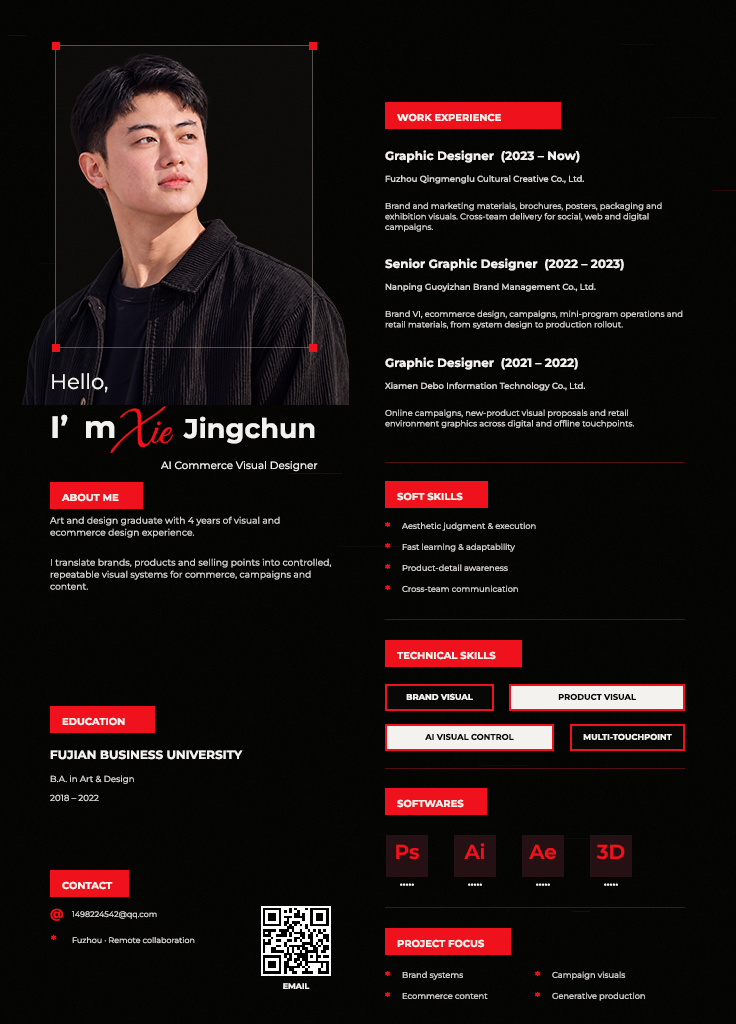
<style>
.page{position:relative;width:736px;height:1024px;background:#040403}
.page>*{position:absolute;margin:0}
.t1{font:10px "Montserrat-Bold";color:#f4f2ee}
.t2{font:12px "Montserrat-Bold";color:#f4f2ee}
.t3{font:8.5px "Montserrat-Medium";color:#d8d5d1}
.t4{font:8.3px/10.5px "Montserrat-Regular";color:#d8d5d1}
.t5{font:21px "Montserrat-Regular";color:#f4f2ee}
.t6{font:31px "Montserrat-Bold";color:#f4f2ee}
.t7{font:44px "GreatVibes-Regular";color:#ef111b}
.t8{font:27px "Montserrat-Bold";color:#f4f2ee}
.t9{font:10.5px "Montserrat-Regular";color:#f4f2ee}
.t10{font:9.2px/12px "Montserrat-Regular";color:#d8d5d1}
.t11{font:12px "Montserrat-Bold";color:#ef111b}
.t12{font:8.3px "Montserrat-Regular";color:#d8d5d1}
.t13{font:8.3px "Montserrat-Bold";color:#f4f2ee}
.t14{font:8.3px "Montserrat-Bold";color:#080807}
.t15{font:8.7px "Montserrat-Regular";color:#d8d5d1}
.t16{font:20px "Montserrat-SemiBold";color:#ef111b}
.t17{font:8px "Montserrat-Bold";color:#f4f2ee}
.t18{font:13px "Montserrat-Bold";color:#ef111b}
.t19{font:8px "Montserrat-Regular";color:#d8d5d1}
</style>
<div class="page">
<p class="t1" style="left:397px;top:113px;width:104px;height:9px">WORK EXPERIENCE</p>
<p class="t2" style="left:385px;top:150px;width:195px;height:13px">Graphic Designer  (2023 – Now)</p>
<p class="t3" style="left:385px;top:175px;width:199px;height:9px">Fuzhou Qingmenglu Cultural Creative Co., Ltd.</p>
<p class="t4" style="left:385px;top:202px;width:277px;height:30px">Brand and marketing materials, brochures, posters, packaging and exhibition visuals. Cross-team delivery for social, web and digital campaigns.</p>
<p class="t2" style="left:385px;top:258px;width:239px;height:13px">Senior Graphic Designer  (2022 – 2023)</p>
<p class="t3" style="left:385px;top:283px;width:211px;height:9px">Nanping Guoyizhan Brand Management Co., Ltd.</p>
<p class="t4" style="left:385px;top:310px;width:298px;height:20px">Brand VI, ecommerce design, campaigns, mini-program operations and retail materials, from system design to production rollout.</p>
<p class="t2" style="left:385px;top:357px;width:193px;height:13px">Graphic Designer  (2021 – 2022)</p>
<p class="t5" style="left:52px;top:373px;width:56px;height:20px">Hello,</p>
<p class="t3" style="left:385px;top:382px;width:200px;height:9px">Xiamen Debo Information Technology Co., Ltd.</p>
<p class="t6" style="left:52px;top:414px;width:63px;height:24px">I’m</p>
<p class="t7" style="left:110px;top:406px;width:63px;height:47px">Xie</p>
<p class="t4" style="left:385px;top:409px;width:249px;height:20px">Online campaigns, new-product visual proposals and retail environment graphics across digital and offline touchpoints.</p>
<p class="t8" style="left:183px;top:416px;width:132px;height:28px">Jingchun</p>
<p class="t9" style="left:161px;top:461px;width:157px;height:11px">AI Commerce Visual Designer</p>
<p class="t1" style="left:61px;top:493px;width:58px;height:9px">ABOUT ME</p>
<p class="t1" style="left:397px;top:492px;width:66px;height:9px">SOFT SKILLS</p>
<p class="t10" style="left:50px;top:516px;width:230px;height:22px">Art and design graduate with 4 years of visual and ecommerce design experience.</p>
<p class="t11" style="left:385px;top:522px;width:6px;height:5px">*</p>
<p class="t12" style="left:402px;top:522px;width:134px;height:9px">Aesthetic judgment &amp; execution</p>
<p class="t11" style="left:385px;top:543px;width:6px;height:5px">*</p>
<p class="t12" style="left:402px;top:543px;width:113px;height:9px">Fast learning &amp; adaptability</p>
<p class="t10" style="left:50px;top:558px;width:281px;height:32px">I translate brands, products and selling points into controlled, repeatable visual systems for commerce, campaigns and content.</p>
<p class="t11" style="left:385px;top:564px;width:6px;height:5px">*</p>
<p class="t12" style="left:402px;top:564px;width:106px;height:7px">Product-detail awareness</p>
<p class="t11" style="left:385px;top:585px;width:6px;height:5px">*</p>
<p class="t12" style="left:402px;top:585px;width:116px;height:7px">Cross-team communication</p>
<p class="t1" style="left:397px;top:651px;width:99px;height:9px">TECHNICAL SKILLS</p>
<p class="t13" style="left:406px;top:693px;width:67px;height:7px">BRAND VISUAL</p>
<p class="t14" style="left:558px;top:693px;width:78px;height:7px">PRODUCT VISUAL</p>
<p class="t1" style="left:62px;top:717px;width:63px;height:9px">EDUCATION</p>
<p class="t14" style="left:425px;top:733px;width:89px;height:7px">AI VISUAL CONTROL</p>
<p class="t13" style="left:583px;top:733px;width:89px;height:7px">MULTI-TOUCHPOINT</p>
<p class="t2" style="left:50px;top:750px;width:193px;height:10px">FUJIAN BUSINESS UNIVERSITY</p>
<p class="t15" style="left:50px;top:775px;width:84px;height:9px">B.A. in Art &amp; Design</p>
<p class="t15" style="left:50px;top:794px;width:49px;height:8px">2018 – 2022</p>
<p class="t1" style="left:397px;top:799px;width:67px;height:9px">SOFTWARES</p>
<p class="t16" style="left:396px;top:844px;width:23px;height:15px">Ps</p>
<p class="t16" style="left:464px;top:843px;width:21px;height:16px">Ai</p>
<p class="t16" style="left:529px;top:844px;width:27px;height:15px">Ae</p>
<p class="t16" style="left:596px;top:844px;width:29px;height:16px">3D</p>
<p class="t1" style="left:62px;top:881px;width:51px;height:9px">CONTACT</p>
<p class="t17" style="left:400px;top:883px;width:14px;height:3px">•••••</p>
<p class="t17" style="left:468px;top:883px;width:14px;height:3px">•••••</p>
<p class="t17" style="left:536px;top:883px;width:14px;height:3px">•••••</p>
<p class="t17" style="left:604px;top:883px;width:14px;height:3px">•••••</p>
<p class="t18" style="left:50px;top:908px;width:13px;height:13px">@</p>
<p class="t19" style="left:72px;top:911px;width:85px;height:8px">1498224542@qq.com</p>
<p class="t11" style="left:51px;top:935px;width:6px;height:5px">*</p>
<p class="t19" style="left:72px;top:937px;width:123px;height:7px">Fuzhou · Remote collaboration</p>
<p class="t1" style="left:397px;top:939px;width:88px;height:9px">PROJECT FOCUS</p>
<p class="t11" style="left:385px;top:971px;width:6px;height:5px">*</p>
<p class="t12" style="left:402px;top:971px;width:61px;height:9px">Brand systems</p>
<p class="t11" style="left:535px;top:971px;width:6px;height:5px">*</p>
<p class="t12" style="left:552px;top:971px;width:74px;height:9px">Campaign visuals</p>
<p class="t17" style="left:283px;top:983px;width:27px;height:6px">EMAIL</p>
<p class="t11" style="left:385px;top:992px;width:6px;height:5px">*</p>
<p class="t12" style="left:402px;top:993px;width:86px;height:6px">Ecommerce content</p>
<p class="t11" style="left:535px;top:992px;width:6px;height:5px">*</p>
<p class="t12" style="left:552px;top:992px;width:93px;height:9px">Generative production</p>
</div>
